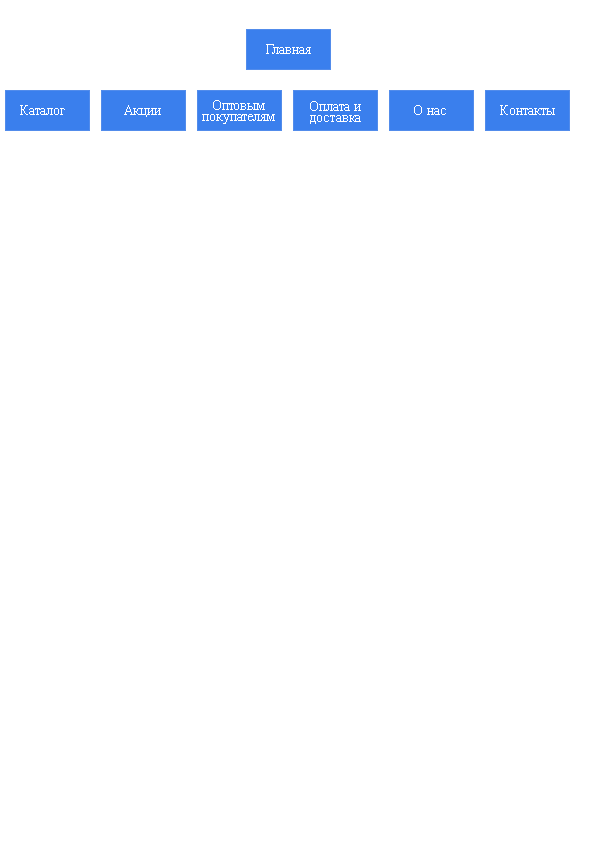
<style>
.page{position:relative;width:595px;height:842px;background:#ffffff}
.page>*{position:absolute;margin:0}
.t1{font:14px "TimesNewRomanPSMT";color:#ffffff}
.t2{font:14px/11px "TimesNewRomanPSMT";color:#ffffff}
</style>
<div class="page">
<p class="t1" style="left:266px;top:44px;width:45px;height:10px">Главная</p>
<p class="t2" style="left:202px;top:100px;width:73px;height:24px;text-align:center">Оптовым<br>покупателям</p>
<p class="t2" style="left:310px;top:101px;width:51px;height:23px;text-align:center">Оплата и<br>доставка</p>
<p class="t1" style="left:20px;top:105px;width:45px;height:10px">Каталог</p>
<p class="t1" style="left:124px;top:105px;width:37px;height:12px">Акции</p>
<p class="t1" style="left:414px;top:105px;width:32px;height:10px">О нас</p>
<p class="t1" style="left:500px;top:105px;width:55px;height:10px">Контакты</p>
</div>
